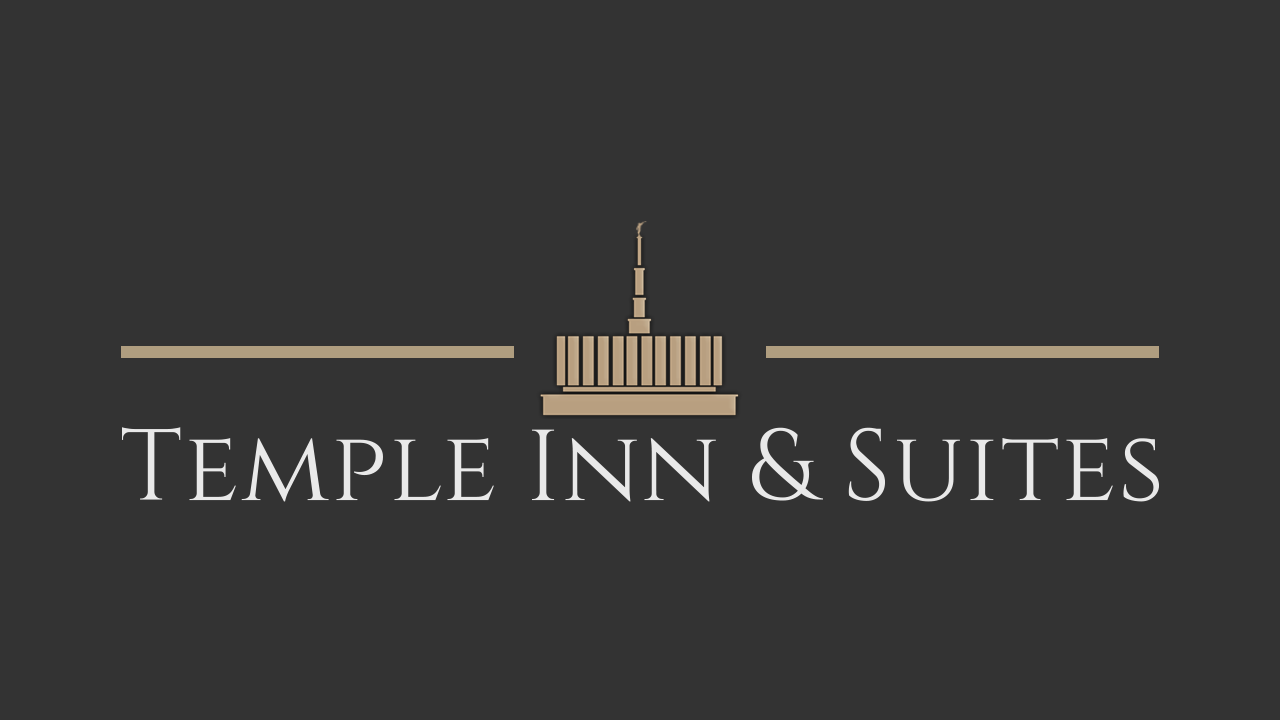
<style>
.page{position:relative;width:1280px;height:720px;background:#333333}
.page>*{position:absolute;margin:0}
.t1{font:100.5px "Cinzel-Regular";letter-spacing:0.02em;color:#e9e9e9}
</style>
<div class="page">
<p class="t1" style="left:122px;top:427px;width:1037px;height:75px">Temple Inn &amp; Suites</p>
</div>
